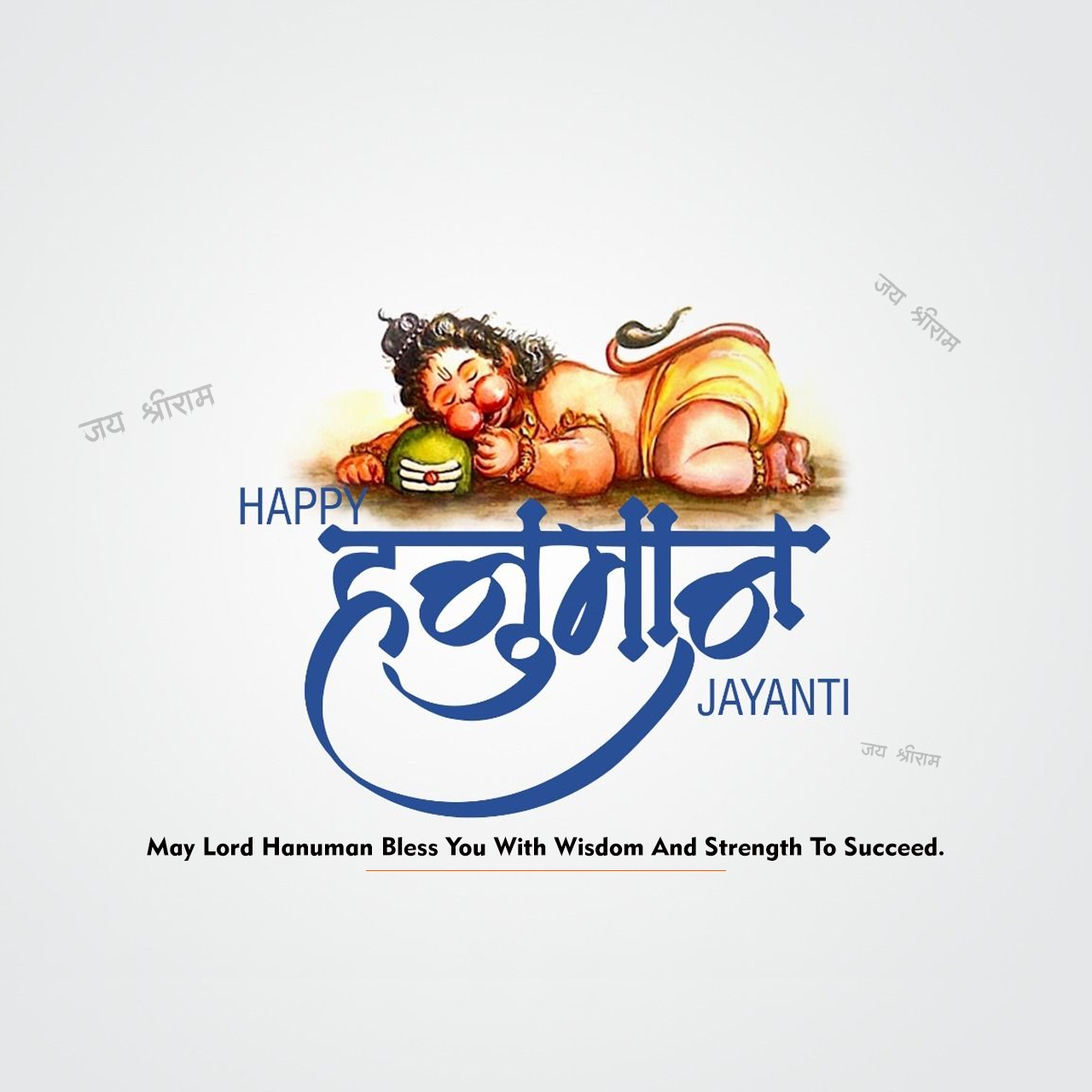
<style>
.page{position:relative;width:1092px;height:1092px}
.page>*{position:absolute;margin:0}
.t1{font:24.7px "AMSNirakriti";color:#bcbebd}
.t2{font:32.3px "AMSNirakriti";color:#c0c0c0}
.t3{font:18.8px "AMSNirakriti";color:#bcbebd}
.t4{font:25.6px "Geometric415BT-BlackA";color:#050100}
</style>
<div class="page">
<p class="t1" style="left:874px;top:273px;width:87px;height:80px;rotate:41deg">jaya MaIrama</p>
<p class="t2" style="left:78px;top:383px;width:137px;height:59px;rotate:-17deg">jaya MaIrama</p>
<p class="t3" style="left:860px;top:742px;width:82px;height:28px;rotate:10deg">jaya MaIrama</p>
<p class="t4" style="left:147px;top:836px;width:797px;height:25px">May Lord Hanuman Bless You With Wisdom And Strength To Succeed.</p>
</div>
